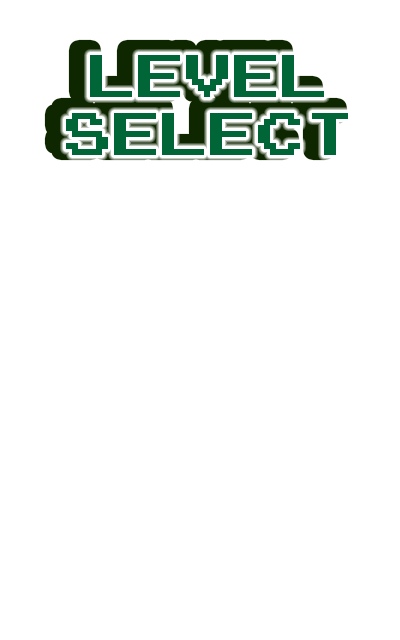
<style>
.page{position:relative;width:400px;height:640px;background:#ffffff}
.page>*{position:absolute;margin:0}
.t1{font:48px "PressStartK";color:#006637}
</style>
<div class="page">
<p class="t1" style="left:66px;top:55px;width:282px;height:100px;text-align:center">LEVEL<br>SELECT</p>
</div>
